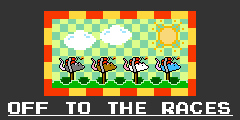
<style>
.page{position:relative;width:240px;height:120px;background:#333333}
.page>*{position:absolute;margin:0}
.t1{font:14px "PressStartReg";color:#ffffff;text-decoration:underline}
</style>
<div class="page">
<p class="t1" style="left:8px;top:102px;width:225px;height:14px">OFF TO THE RACES</p>
</div>
